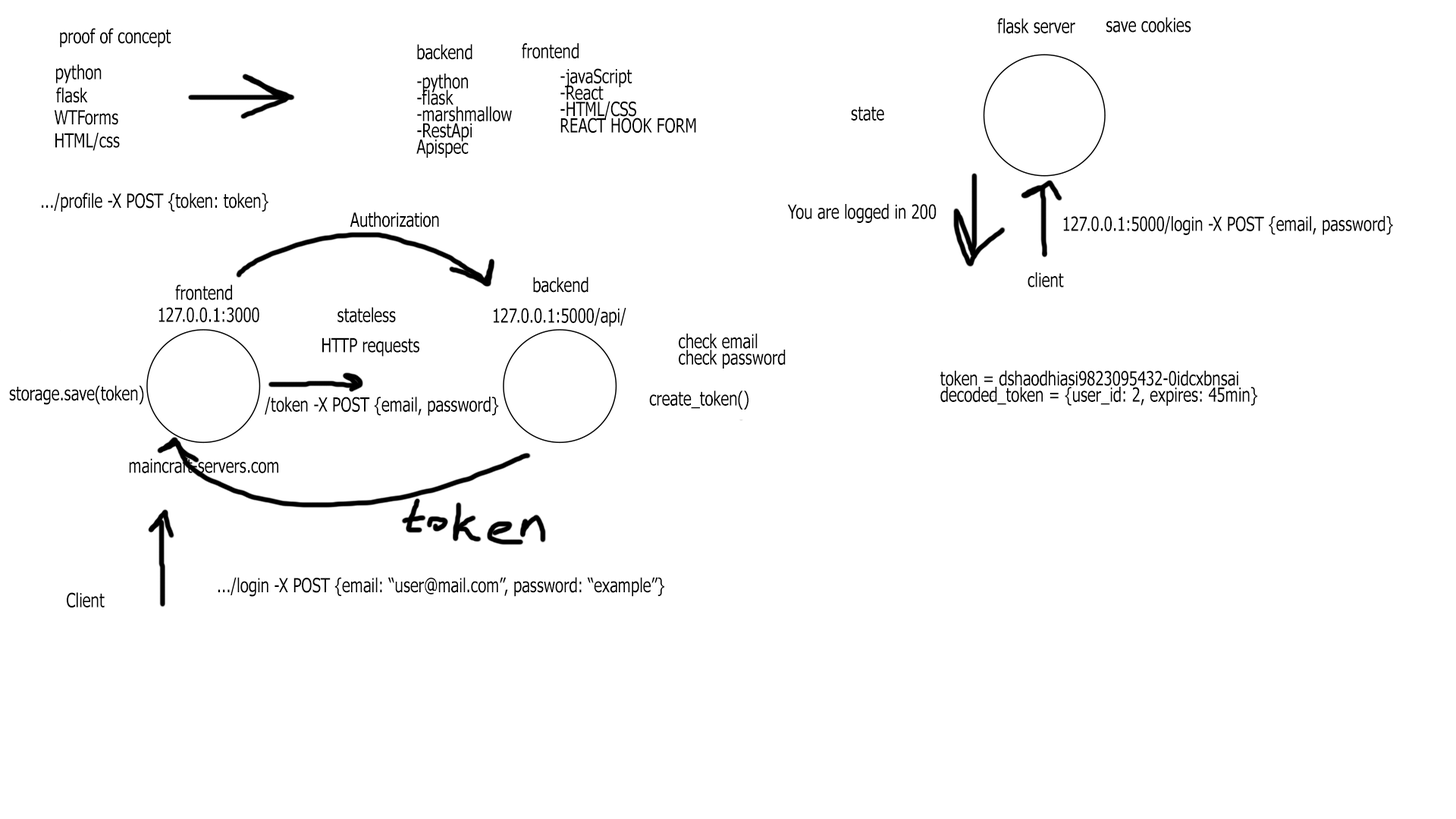
<style>
.page{position:relative;width:1456px;height:819px;background:#ffffff}
.page>*{position:absolute;margin:0}
.t1{font:19.5px "Tahoma";color:#000000;scale:0.79 1}
</style>
<div class="page">
<p class="t1" style="left:1106px;top:17px;width:85px;height:16px">save cookies</p>
<p class="t1" style="left:60px;top:28px;width:111px;height:20px">proof of concept</p>
<p class="t1" style="left:997px;top:18px;width:78px;height:16px">flask server</p>
<p class="t1" style="left:417px;top:44px;width:55px;height:16px">backend</p>
<p class="t1" style="left:522px;top:43px;width:57px;height:16px">frontend</p>
<p class="t1" style="left:56px;top:64px;width:46px;height:19px">python</p>
<p class="t1" style="left:416px;top:74px;width:96px;height:84px;text-align:right">-python<br>-flask<br>-marshmallow<br>-RestApi<br>Apispec</p>
<p class="t1" style="left:560px;top:68px;width:136px;height:65px;text-align:right">-javaScript<br>-React<br>-HTML/CSS<br>REACT HOOK FORM</p>
<p class="t1" style="left:56px;top:87px;width:32px;height:16px">flask</p>
<p class="t1" style="left:54px;top:110px;width:64px;height:15px">WTForms</p>
<p class="t1" style="left:851px;top:106px;width:33px;height:15px">state</p>
<p class="t1" style="left:55px;top:133px;width:65px;height:18px">HTML/css</p>
<p class="t1" style="left:42px;top:193px;width:226px;height:19px">.../profile -X POST {token: token}</p>
<p class="t1" style="left:787px;top:203px;width:150px;height:20px">You are logged in 200</p>
<p class="t1" style="left:350px;top:212px;width:89px;height:15px">Authorization</p>
<p class="t1" style="left:1063px;top:215px;width:330px;height:20px">127.0.0.1:5000/login -X POST {email, password}</p>
<p class="t1" style="left:533px;top:277px;width:55px;height:16px">backend</p>
<p class="t1" style="left:1028px;top:272px;width:36px;height:15px">client</p>
<p class="t1" style="left:175px;top:284px;width:57px;height:16px">frontend</p>
<p class="t1" style="left:158px;top:307px;width:101px;height:15px">127.0.0.1:3000</p>
<p class="t1" style="left:337px;top:307px;width:59px;height:16px">stateless</p>
<p class="t1" style="left:494px;top:308px;width:132px;height:19px">127.0.0.1:5000/api/</p>
<p class="t1" style="left:322px;top:337px;width:97px;height:19px">HTTP requests</p>
<p class="t1" style="left:679px;top:333px;width:107px;height:36px;text-align:right">check email<br>check password</p>
<p class="t1" style="left:940px;top:370px;width:317px;height:36px;text-align:right">token = dshaodhiasi9823095432-0idcxbnsai<br>decoded_token = {user_id: 2, expires: 45min}</p>
<p class="t1" style="left:9px;top:385px;width:135px;height:20px">storage.save(token)</p>
<p class="t1" style="left:265px;top:397px;width:234px;height:19px">/token -X POST {email, password}</p>
<p class="t1" style="left:649px;top:391px;width:99px;height:18px">create_token()</p>
<p class="t1" style="left:129px;top:457px;width:149px;height:16px">maincraft-servers.com</p>
<p class="t1" style="left:218px;top:577px;width:446px;height:20px">.../login -X POST {email: “user@mail.com”, password: “example”}</p>
<p class="t1" style="left:67px;top:592px;width:38px;height:16px">Client</p>
</div>
